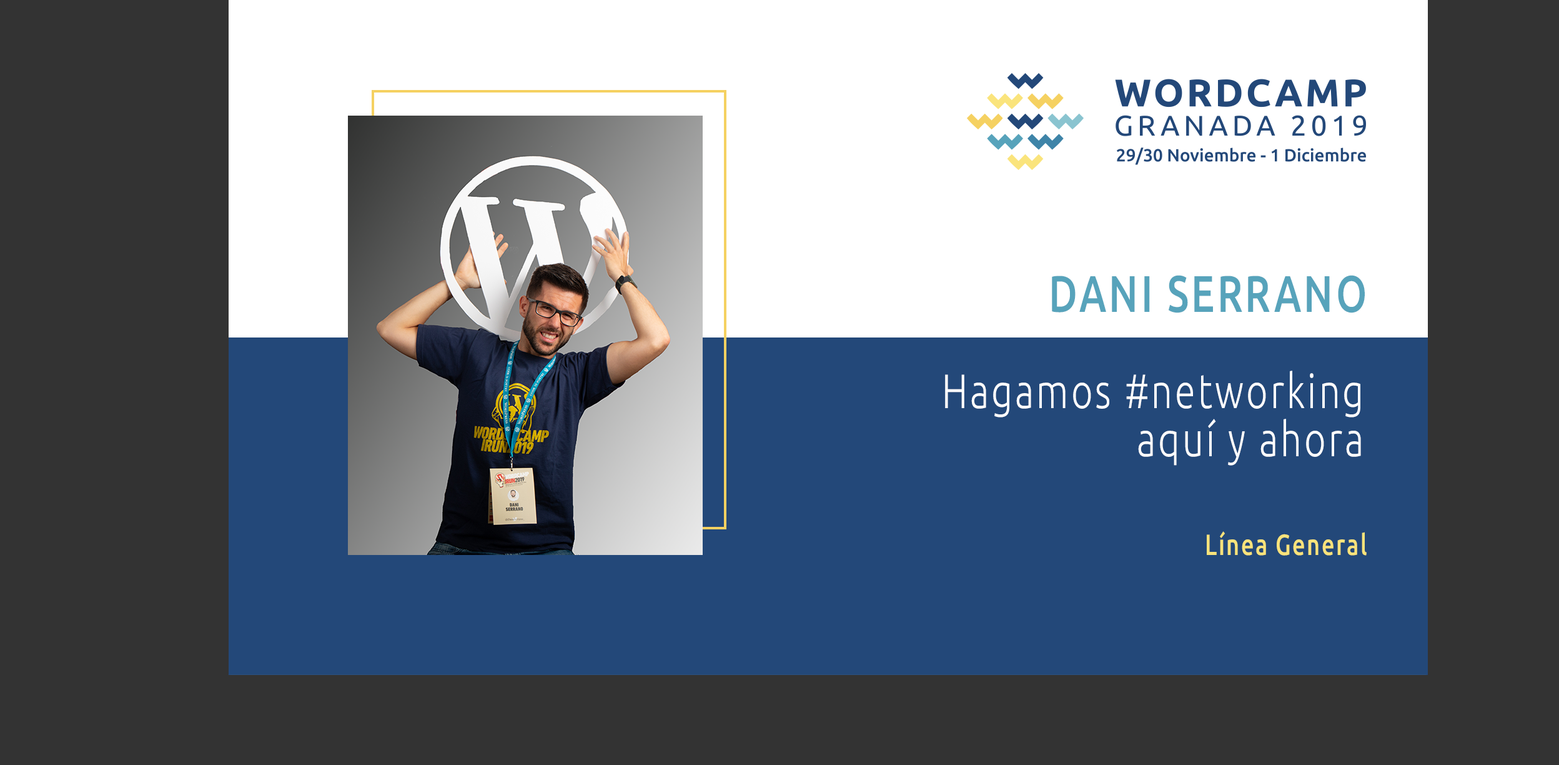
<style>
.page{position:relative;width:1559px;height:765px;background:#333333}
.page>*{position:absolute;margin:0}
.t1{font:51.4px "Ubuntu-Medium";letter-spacing:0.068em;color:#57a3bb;scale:0.77 1}
.t2{font:48.2px/48.2px "Ubuntu-Light";letter-spacing:0.068em;color:#ffffff;scale:0.77 1}
.t3{font:29.2px "Ubuntu-Medium";letter-spacing:0.068em;color:#f9e37b;scale:0.77 1}
</style>
<div class="page">
<p class="t1" style="left:1052px;top:275px;width:313px;height:38px">DANI SERRANO</p>
<p class="t2" style="left:945px;top:370px;width:416px;height:95px;text-align:right">Hagamos #networking aquí y ahora</p>
<p class="t3" style="left:1207px;top:531px;width:160px;height:24px">Línea General</p>
</div>
